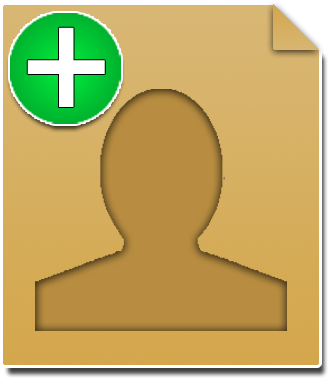
<style>
.page{position:relative;width:328px;height:378px}
.page>*{position:absolute;margin:0}
.t1{font:148.4px "MyriadPro-Bold";color:#ffffff}
</style>
<div class="page">
<p class="t1" style="left:27px;top:27px;width:78px;height:80px">+</p>
</div>
